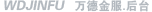
<style>
.page{position:relative;width:152px;height:12px;background:#ffffff}
.page>*{position:absolute;margin:0}
.t1{font:13.2px "FZDHTK--GBK1-0";color:#b3b9bf;font-style:italic}
.t2{font:12px "FZDHTK--GBK1-0";color:#b3b9bf}
</style>
<div class="page">
<p class="t1" style="left:4px;top:0px;width:61px;height:11px">WDJINFU</p>
<p class="t2" style="left:75px;top:0px;width:74px;height:12px">万德金服.后台</p>
</div>
